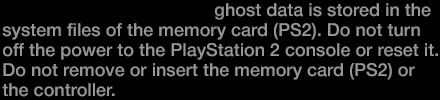
<style>
.page{position:relative;width:440px;height:100px;background:#000000}
.page>*{position:absolute;margin:0}
.t1{font:18px/20px "HelveticaNeue-Medium";color:#969696}
.t2{font:18px/20px "HelveticaNeue-Bold";color:#969696}
</style>
<div class="page">
<p class="t1" style="left:2px;top:3px;width:436px;height:94px"><span class="t2">MEMORY CARD SLOT 1</span> ghost data is stored in the<br>system files of the memory card (PS2). Do not turn<br>off the power to the PlayStation 2 console or reset it.<br>Do not remove or insert the memory card (PS2) or<br>the controller.</p>
</div>
